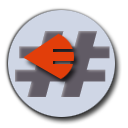
<style>
.page{position:relative;width:128px;height:128px;background:#ffffff}
.page>*{position:absolute;margin:0}
.t1{font:99px "Knockout-HTF94-UltmtSumo";scale:1.4 1}
</style>
<div class="page">
<p class="t1" style="left:15px;top:31px;width:95px;height:66px">#</p>
</div>
